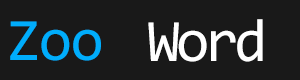
<style>
.page{position:relative;width:300px;height:80px;background:#191919}
.page>*{position:absolute;margin:0}
.t1{font:60.4px "Consolas";letter-spacing:-0.025em;color:#00adfc}
.t2{font:60.4px "Consolas";letter-spacing:-0.07em;color:#ffffff}
</style>
<div class="page">
<p class="t1" style="left:10px;top:21px;width:91px;height:40px">Zoo</p>
<p class="t2" style="left:148px;top:19px;width:115px;height:43px">Word</p>
</div>
